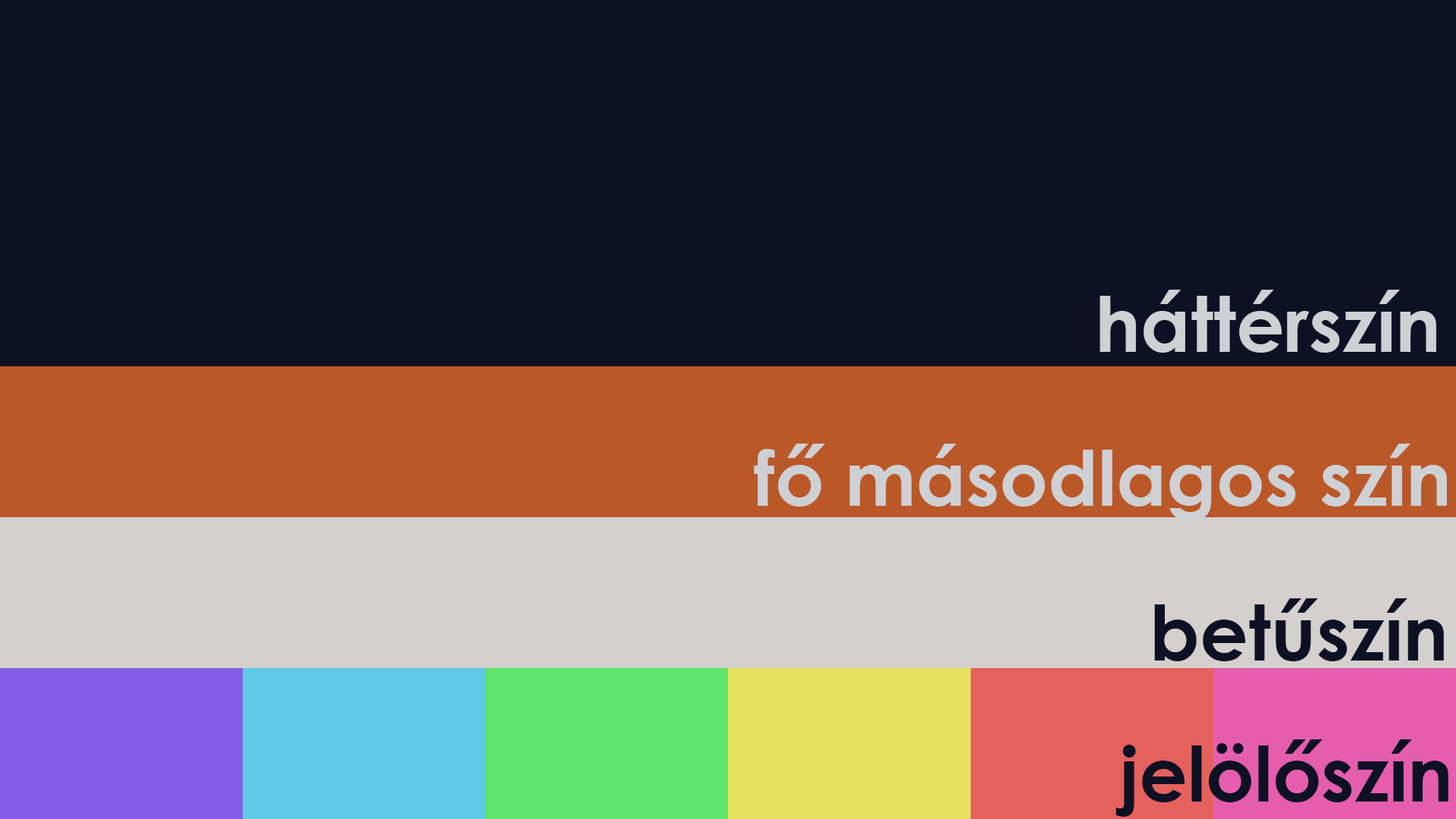
<style>
.page{position:relative;width:1456px;height:819px;background:#0e1023}
.page>*{position:absolute;margin:0}
.t1{font:75.8px "CenturyGothic-Bold";color:#ced0d4}
.t2{font:75.8px "CenturyGothic-Bold";color:#0e1023}
</style>
<div class="page">
<p class="t1" style="left:1100px;top:290px;width:336px;height:63px">háttérszín</p>
<p class="t1" style="left:754px;top:444px;width:693px;height:77px">fő másodlagos szín</p>
<p class="t2" style="left:1154px;top:598px;width:290px;height:63px">betűszín</p>
<p class="t2" style="left:1115px;top:739px;width:333px;height:78px">jelölőszín</p>
</div>
